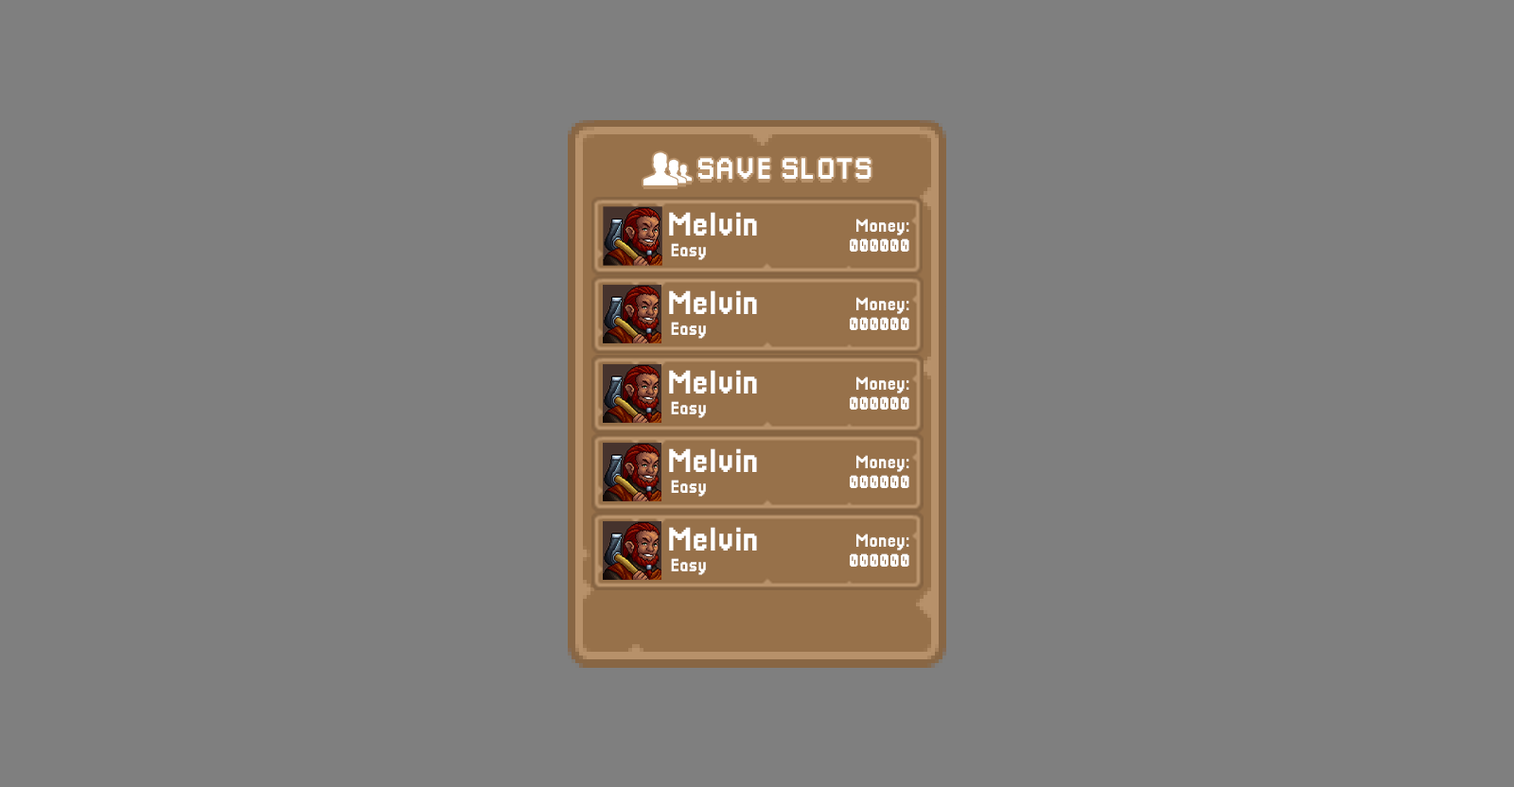
<style>
.page{position:relative;width:1514px;height:787px;background:#7f7f7f}
.page>*{position:absolute;margin:0}
.t1{font:30px "Pixellari";color:#ffffff}
.t2{font:33.4px "Pixellari";color:#ffffff}
.t3{font:18.2px "Pixellari";color:#ffffff}
</style>
<div class="page">
<p class="t1" style="left:698px;top:158px;width:174px;height:21px">SAVE SLOTS</p>
<p class="t2" style="left:669px;top:212px;width:88px;height:24px">Melvin</p>
<p class="t3" style="left:857px;top:219px;width:53px;height:17px">Money:</p>
<p class="t3" style="left:671px;top:243px;width:35px;height:17px">Easy</p>
<p class="t3" style="left:850px;top:239px;width:60px;height:13px">000000</p>
<p class="t2" style="left:669px;top:291px;width:88px;height:23px">Melvin</p>
<p class="t3" style="left:857px;top:297px;width:53px;height:17px">Money:</p>
<p class="t3" style="left:850px;top:317px;width:60px;height:13px">000000</p>
<p class="t3" style="left:671px;top:322px;width:35px;height:17px">Easy</p>
<p class="t2" style="left:669px;top:370px;width:88px;height:24px">Melvin</p>
<p class="t2" style="left:669px;top:370px;width:88px;height:24px">Melvin</p>
<p class="t3" style="left:857px;top:377px;width:53px;height:17px">Money:</p>
<p class="t3" style="left:857px;top:377px;width:53px;height:17px">Money:</p>
<p class="t3" style="left:671px;top:401px;width:35px;height:17px">Easy</p>
<p class="t3" style="left:671px;top:401px;width:35px;height:17px">Easy</p>
<p class="t3" style="left:850px;top:397px;width:60px;height:13px">000000</p>
<p class="t3" style="left:850px;top:397px;width:60px;height:13px">000000</p>
<p class="t2" style="left:669px;top:449px;width:88px;height:23px">Melvin</p>
<p class="t2" style="left:669px;top:449px;width:88px;height:23px">Melvin</p>
<p class="t3" style="left:857px;top:455px;width:53px;height:17px">Money:</p>
<p class="t3" style="left:857px;top:455px;width:53px;height:17px">Money:</p>
<p class="t3" style="left:671px;top:480px;width:35px;height:17px">Easy</p>
<p class="t3" style="left:671px;top:480px;width:35px;height:17px">Easy</p>
<p class="t3" style="left:850px;top:475px;width:60px;height:13px">000000</p>
<p class="t3" style="left:850px;top:475px;width:60px;height:13px">000000</p>
<p class="t2" style="left:669px;top:527px;width:88px;height:24px">Melvin</p>
<p class="t2" style="left:669px;top:527px;width:88px;height:24px">Melvin</p>
<p class="t3" style="left:857px;top:534px;width:53px;height:17px">Money:</p>
<p class="t3" style="left:857px;top:534px;width:53px;height:17px">Money:</p>
<p class="t3" style="left:850px;top:554px;width:60px;height:13px">000000</p>
<p class="t3" style="left:850px;top:554px;width:60px;height:13px">000000</p>
<p class="t3" style="left:671px;top:558px;width:35px;height:17px">Easy</p>
<p class="t3" style="left:671px;top:558px;width:35px;height:17px">Easy</p>
</div>
